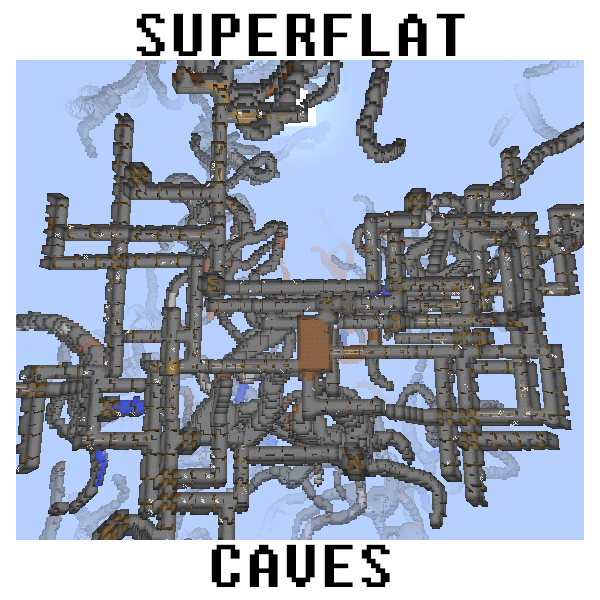
<style>
.page{position:relative;width:600px;height:600px;background:#b6d0ff}
.page>*{position:absolute;margin:0}
.t1{font:60px "Fixedsys";color:#010101}
.t2{font:60px "Fixedsys";color:#000000}
</style>
<div class="page">
<p class="t1" style="left:136px;top:13px;width:329px;height:43px">SUPERFLAT</p>
<p class="t2" style="left:211px;top:544px;width:179px;height:43px">CAVES</p>
</div>
